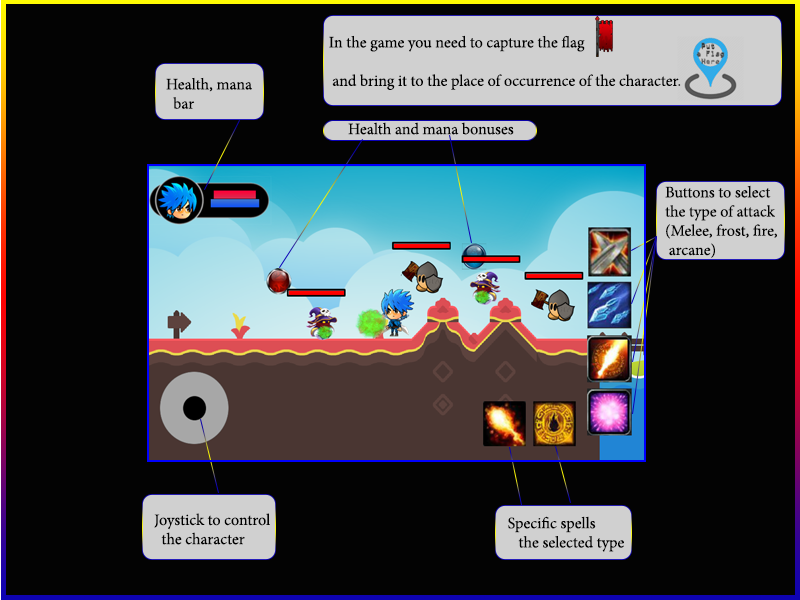
<style>
.page{position:relative;width:800px;height:600px;background:#030303}
.page>*{position:absolute;margin:0}
.t1{font:16px "MinionPro-Regular";color:#000000}
</style>
<div class="page">
<p class="t1" style="left:329px;top:35px;width:352px;height:55px">In the game you need to capture the flag<br><br> and bring it to the place of occurrence of the character.</p>
<p class="t1" style="left:166px;top:77px;width:86px;height:32px">Health, mana<br>     bar</p>
<p class="t1" style="left:348px;top:122px;width:166px;height:13px">Health and mana bonuses</p>
<p class="t1" style="left:665px;top:185px;width:112px;height:73px">Buttons to select <br>the type of attack<br>(Melee, frost, fire,<br> arcane)</p>
<p class="t1" style="left:154px;top:513px;width:116px;height:32px">Joystick to control<br>  the character</p>
<p class="t1" style="left:508px;top:516px;width:116px;height:36px">Specific spells <br>   the selected type</p>
</div>
